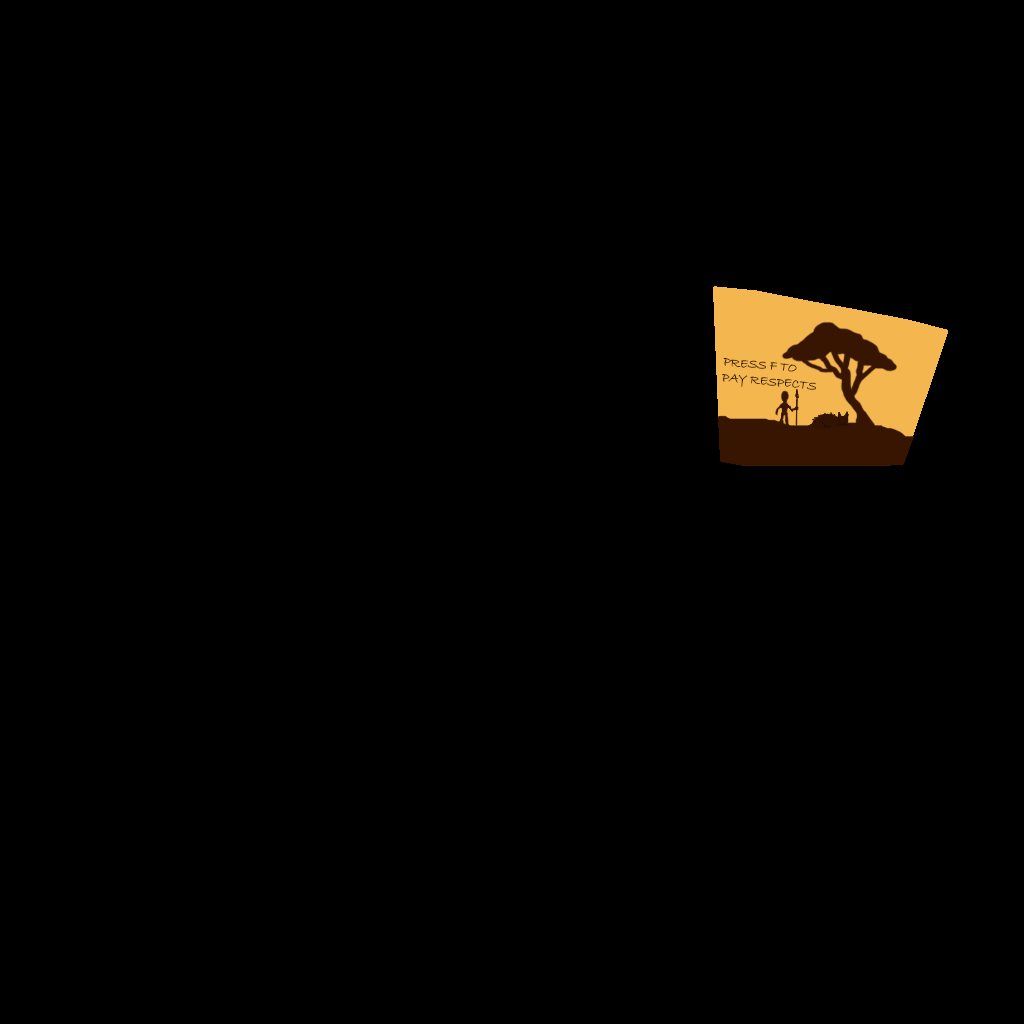
<style>
.page{position:relative;width:1024px;height:1024px;background:#000000}
.page>*{position:absolute;margin:0}
.t1{font:13px "BradleyHandITC";color:#361500}
</style>
<div class="page">
<p class="t1" style="left:722px;top:358px;width:94px;height:32px;rotate:5deg">PRESS F TO <br>PAY RESPECTS</p>
</div>
